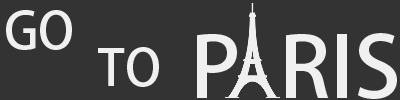
<style>
.page{position:relative;width:400px;height:100px;background:#333333}
.page>*{position:absolute;margin:0}
.t1{font:50px "AdobeFanHeitiStd-Bold";color:#f0f0f0}
.t2{font:83.7px "AdobeFanHeitiStd-Bold";color:#f0f0f0;scale:1.03 1}
.t3{font:12px "AdobeFanHeitiStd-Bold";color:#f0f0f0}
</style>
<div class="page">
<p class="t1" style="left:6px;top:10px;width:66px;height:40px">GO</p>
<p class="t2" style="left:197px;top:33px;width:200px;height:66px">P  RIS</p>
<p class="t3" style="left:98px;top:47px;width:61px;height:40px">TO</p>
</div>
